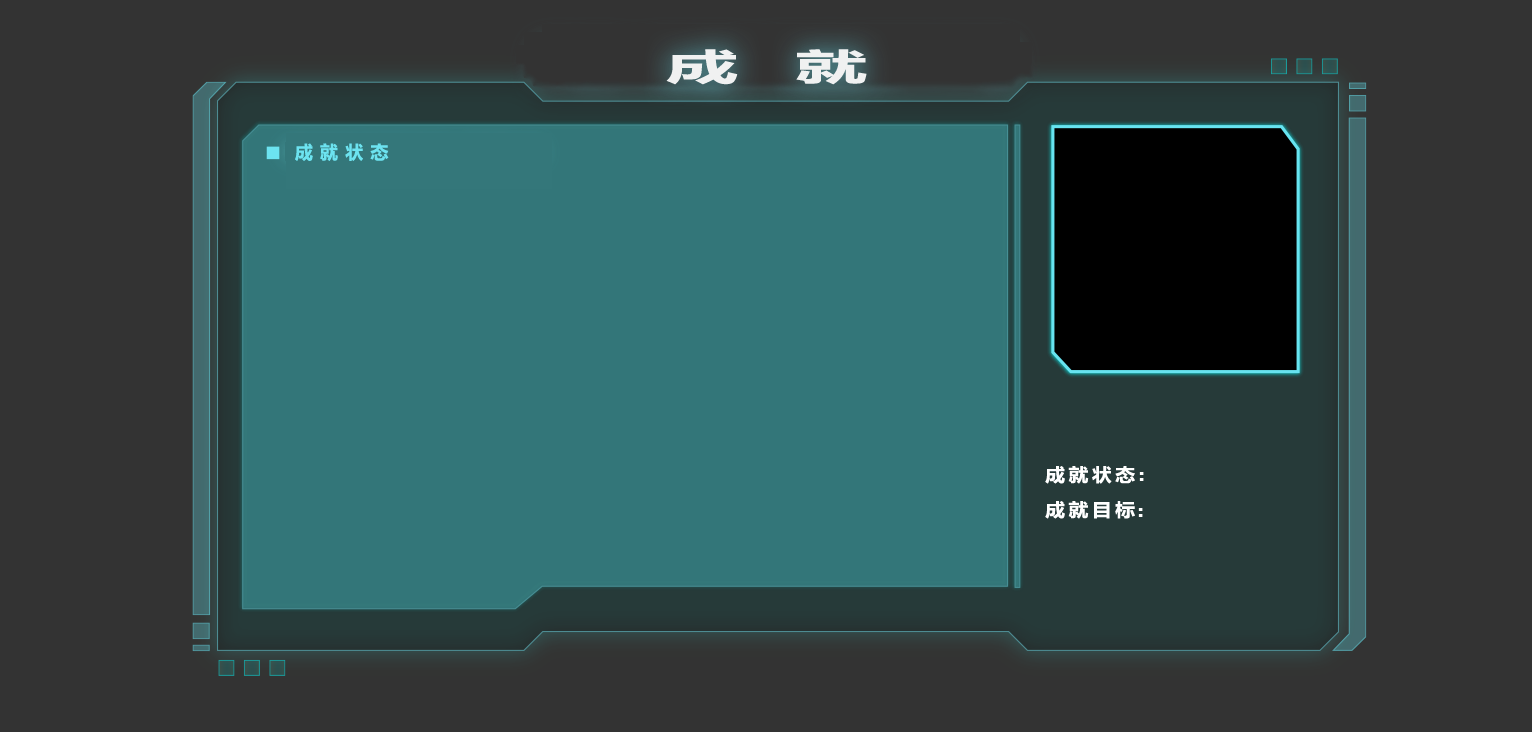
<style>
.page{position:relative;width:1532px;height:732px;background:#333333}
.page>*{position:absolute;margin:0}
.t1{font:36px "MicrosoftYaHei-Bold";letter-spacing:0.8em;color:#f0f1f1;scale:2 1}
.t2{font:18px "MicrosoftYaHei-Bold";letter-spacing:0.4em;color:#6ce3f0}
.t3{font:18px "MicrosoftYaHei-Bold";letter-spacing:0.18em;color:#ffffff;scale:1.1 1}
</style>
<div class="page">
<p class="t1" style="left:666px;top:49px;width:201px;height:36px">成就</p>
<p class="t2" style="left:295px;top:143px;width:94px;height:18px">成就状态</p>
<p class="t3" style="left:1045px;top:466px;width:90px;height:18px">成就状态</p>
<p class="t3" style="left:1045px;top:501px;width:90px;height:18px">成就目标</p>
</div>
